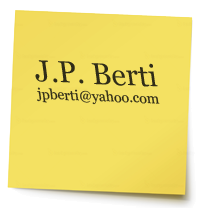
<style>
.page{position:relative;width:200px;height:208px;background:#f4e162}
.page>*{position:absolute;margin:0}
.t1{font:14.2px "Georgia";color:#312d18}
.t2{font:30.5px "Georgia";color:#312d18}
</style>
<div class="page">
<p class="t1" style="left:35px;top:60px;width:125px;height:45px;rotate:2deg"><span class="t2">J.P. Berti<br></span>jpberti@yahoo.com</p>
</div>
